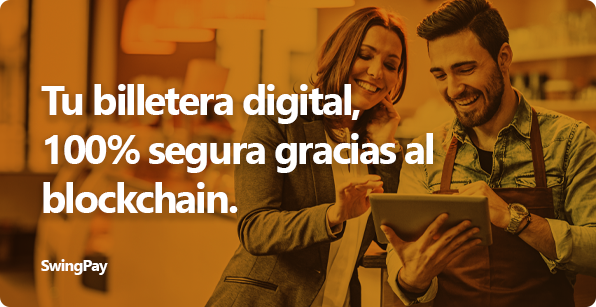
<style>
.page{position:relative;width:596px;height:307px}
.page>*{position:absolute;margin:0}
.t1{font:41px "SegoeUI-Bold";letter-spacing:-0.05em;color:#ffffff}
.t2{font:16px "SegoeUI-Bold";letter-spacing:-0.05em;color:#ffffff}
</style>
<div class="page">
<p class="t1" style="left:41px;top:84px;width:392px;height:129px">Tu billetera digital,<br>100% segura gracias al<br>blockchain.</p>
<p class="t2" style="left:41px;top:259px;width:67px;height:16px">SwingPay</p>
</div>
